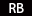
<style>
.page{position:relative;width:32px;height:16px;background:#040001}
.page>*{position:absolute;margin:0}
.t1{font:14.2px "MyriadPro-Regular";color:#ffffff}
</style>
<div class="page">
<p class="t1" style="left:9px;top:3px;width:15px;height:10px">RB</p>
</div>
